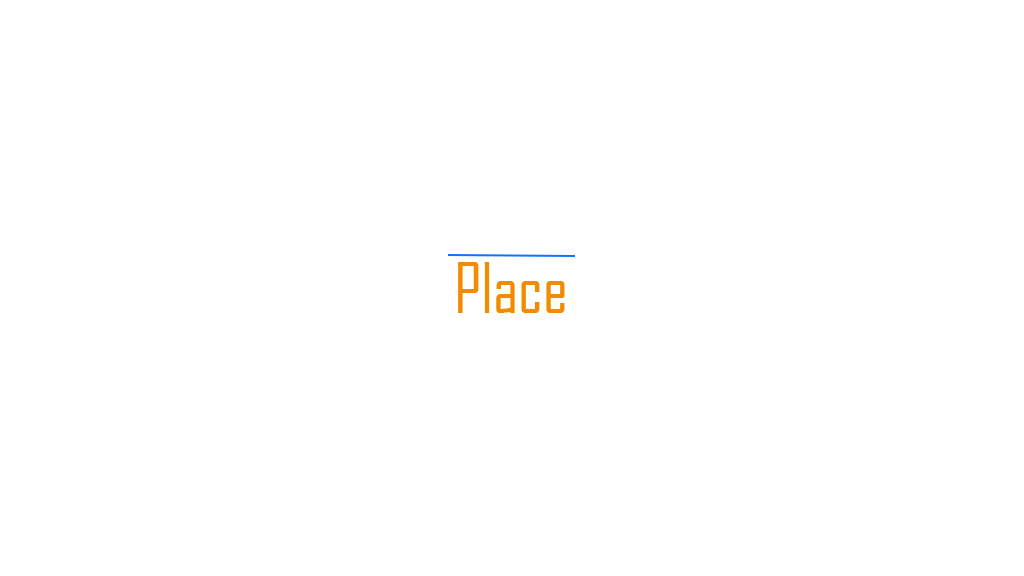
<style>
.page{position:relative;width:1024px;height:576px;background:#ffffff}
.page>*{position:absolute;margin:0}
.t1{font:66.7px "AgencyFB-Reg";color:#f28b00}
</style>
<div class="page">
<p class="t1" style="left:458px;top:262px;width:107px;height:51px">Place</p>
</div>
